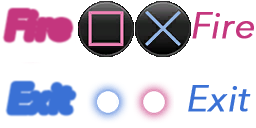
<style>
.page{position:relative;width:256px;height:128px;background:#ffffff}
.page>*{position:absolute;margin:0}
.t1{font:36px "AvenirNextLTPro-It";letter-spacing:0.01em;color:#c4367e;font-weight:bold}
.t2{font:36px "AvenirNextLTPro-It";letter-spacing:0.01em;color:#3a71d5;font-weight:bold}
</style>
<div class="page">
<p class="t1" style="left:192px;top:12px;width:62px;height:27px">Fire</p>
<p class="t2" style="left:188px;top:85px;width:63px;height:27px">Exit</p>
</div>
